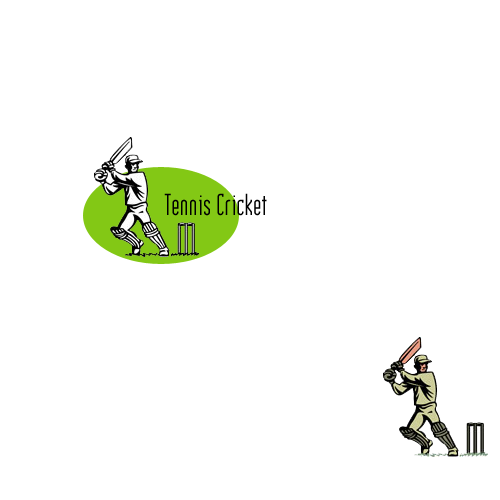
<style>
.page{position:relative;width:500px;height:500px;background:#ffffff}
.page>*{position:absolute;margin:0}
.t1{font:30px "Institution";color:#000000}
</style>
<div class="page">
<p class="t1" style="left:164px;top:193px;width:103px;height:23px">Tennis Cricket</p>
</div>
